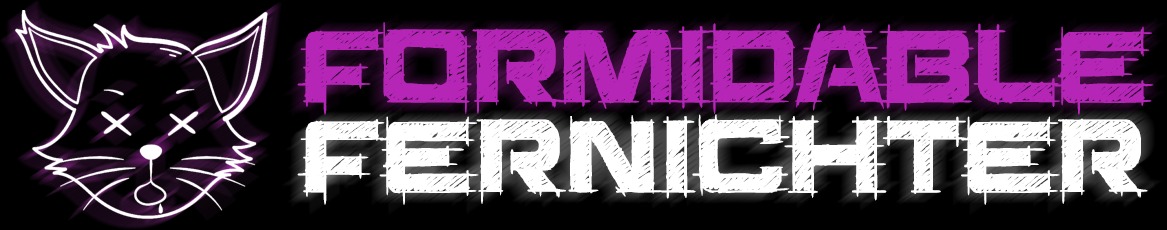
<style>
.page{position:relative;width:1167px;height:230px;background:#000000}
.page>*{position:absolute;margin:0}
.t1{font:120px/90px "SaucerBB";letter-spacing:-0.021em;color:#b525b6}
.t2{font:120px/90px "SaucerBB";color:#ffffff}
</style>
<div class="page">
<p class="t1" style="left:297px;top:22px;width:857px;height:183px">Formidable<br><span class="t2">Fernichter</span></p>
</div>
